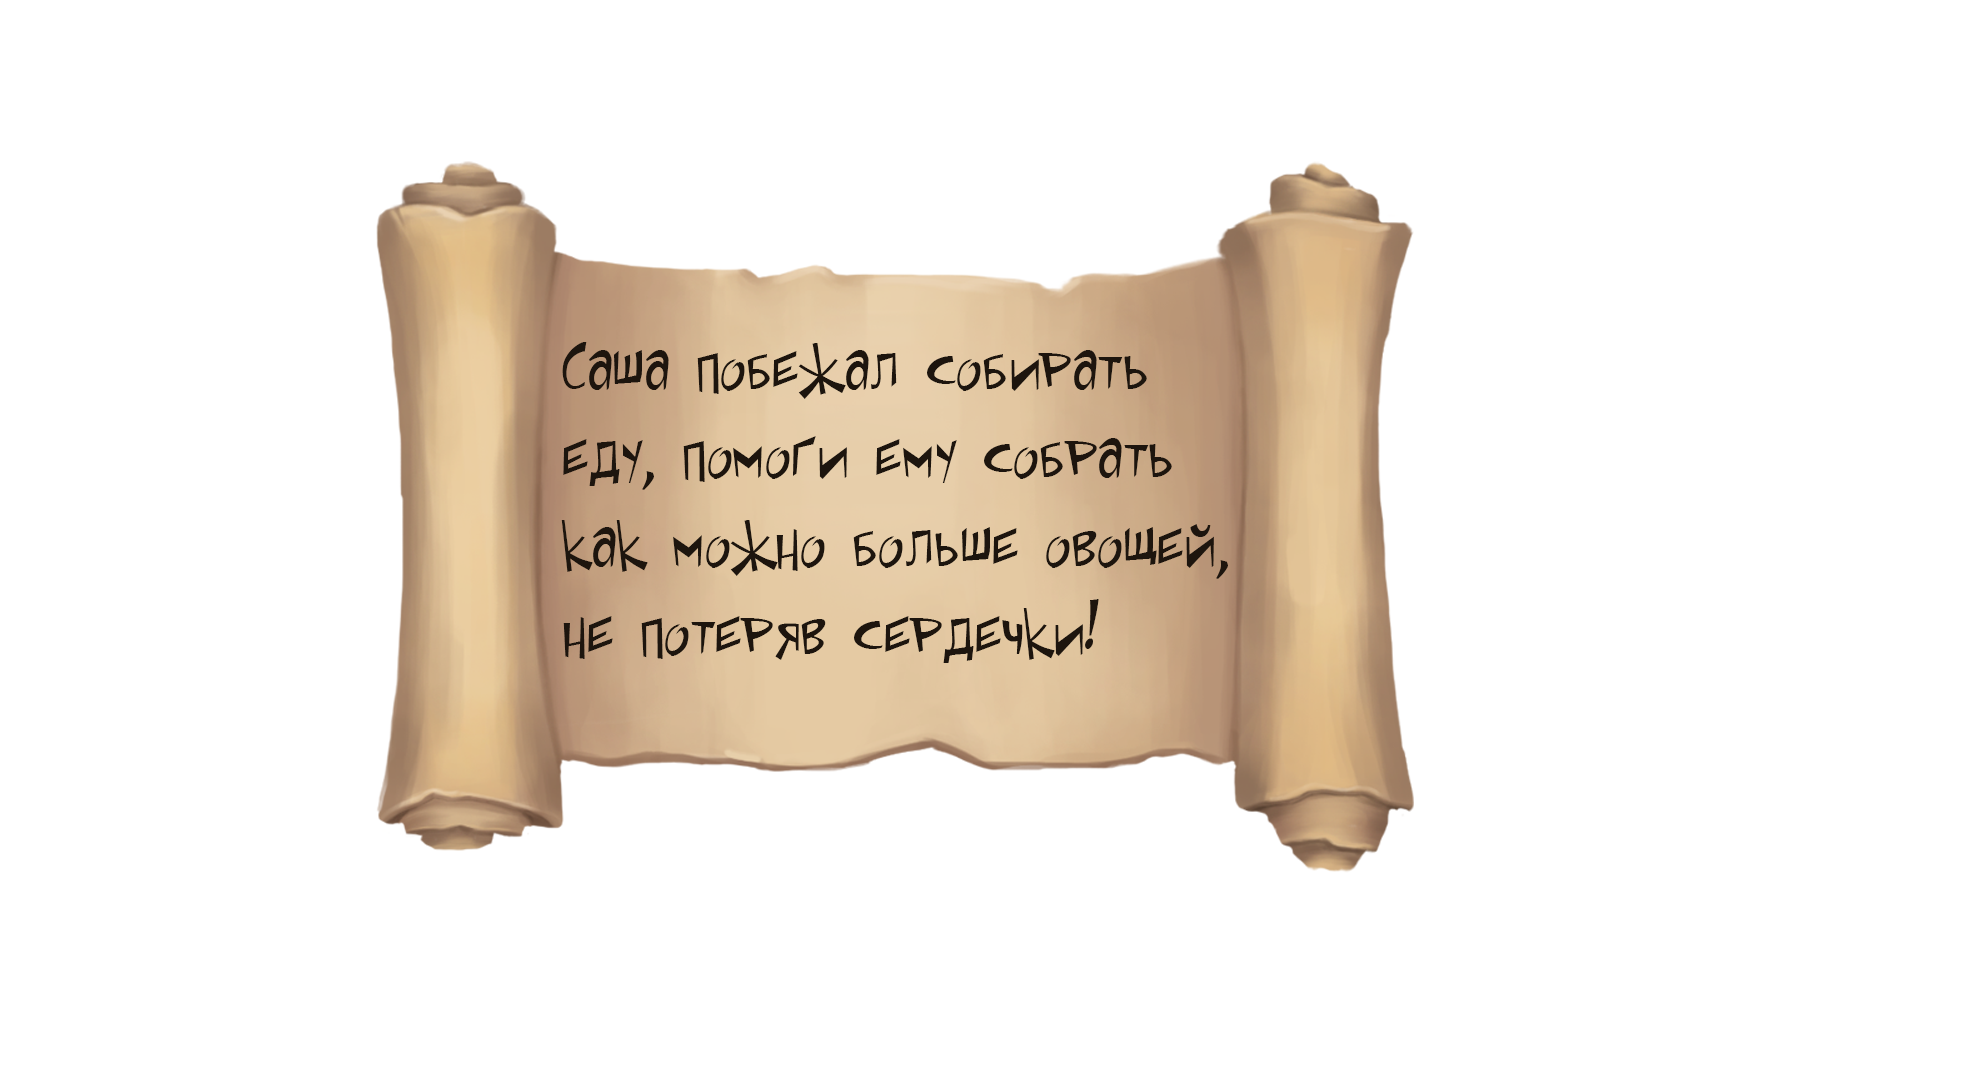
<style>
.page{position:relative;width:1980px;height:1080px;background:#ffffff}
.page>*{position:absolute;margin:0}
.t1{font:8.9px "SpaceToasterCYR-Regular";color:#1d150e}
</style>
<div class="page">
<p class="t1" style="left:561px;top:342px;width:667px;height:321px;text-align:right">Саша побежал собирать <br>еду, помоги ему собрать <br>как можно больше овощей, <br>не потеряв сердечки!</p>
</div>
